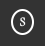
<style>
.page{position:relative;width:45px;height:46px;background:#333333}
.page>*{position:absolute;margin:0}
.t1{font:18.2px "SC_KHALID";color:#ffffff;scale:0.91 1}
</style>
<div class="page">
<p class="t1" style="left:20px;top:17px;width:6px;height:10px">s</p>
</div>
